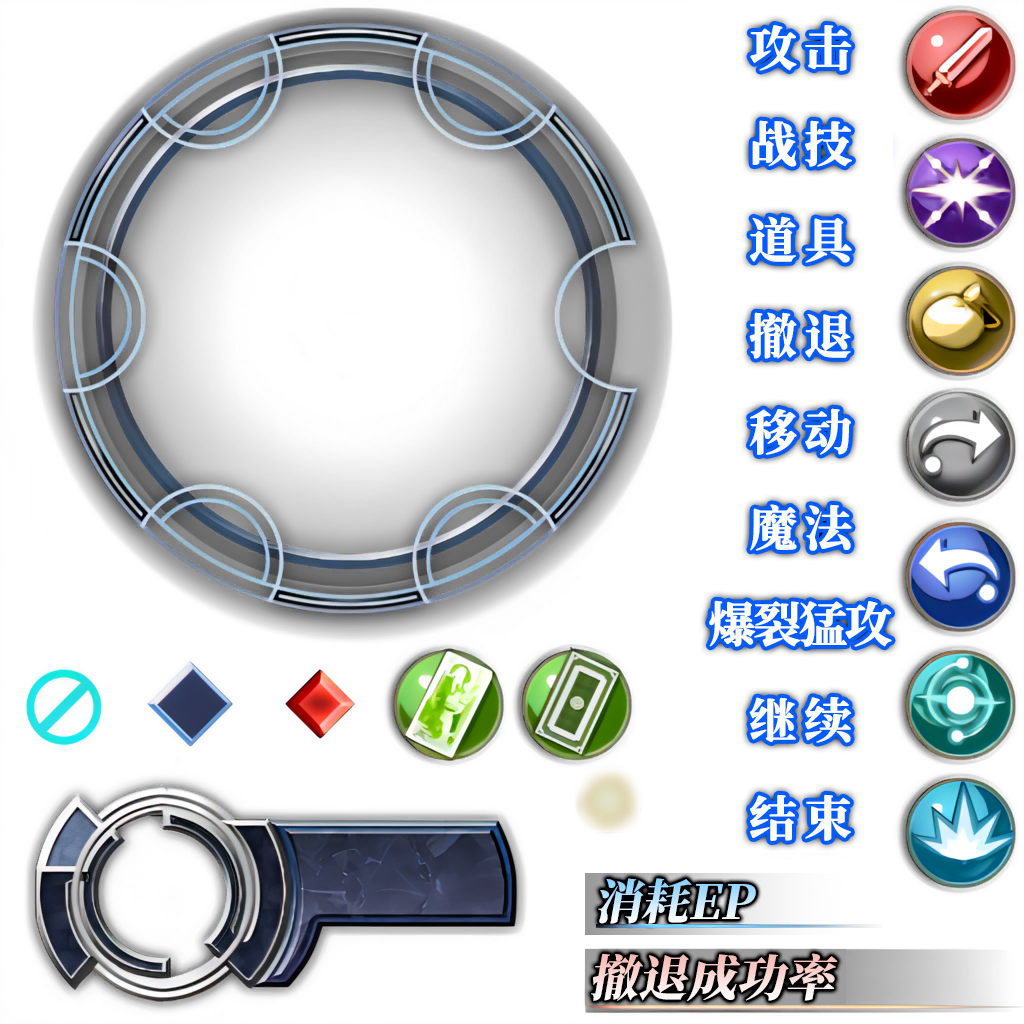
<style>
.page{position:relative;width:1024px;height:1024px;background:#ffffff}
.page>*{position:absolute;margin:0}
.t1{font:48px "ChillJinshuSongHeavy";letter-spacing:0.15em;color:#fffffa}
.t2{font:48px "ChillJinshuSongHeavy";letter-spacing:-0.05em;color:#fffffa}
.t3{font:47px "SourceHanSerifCN-Heavy";font-style:italic}
.t4{font:49px "SourceHanSerifCN-Heavy";font-style:italic}
</style>
<div class="page">
<p class="t1" style="left:750px;top:25px;width:102px;height:46px">攻击</p>
<p class="t1" style="left:752px;top:120px;width:100px;height:47px">战技</p>
<p class="t1" style="left:750px;top:216px;width:102px;height:47px">道具</p>
<p class="t1" style="left:749px;top:312px;width:102px;height:47px">撤退</p>
<p class="t1" style="left:749px;top:408px;width:102px;height:47px">移动</p>
<p class="t1" style="left:750px;top:504px;width:102px;height:47px">魔法</p>
<p class="t2" style="left:709px;top:600px;width:183px;height:47px">爆裂猛攻</p>
<p class="t1" style="left:749px;top:696px;width:102px;height:47px">继续</p>
<p class="t1" style="left:750px;top:794px;width:101px;height:47px">结束</p>
<p class="t3" style="left:598px;top:878px;width:158px;height:46px">消耗EP</p>
<p class="t4" style="left:591px;top:953px;width:247px;height:49px">撤退成功率</p>
</div>
